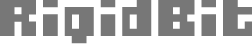
<style>
.page{position:relative;width:252px;height:44px;background:#777777}
.page>*{position:absolute;margin:0}
.t1{font:72px "Gubblebum-BlacknBlocky";color:#777777}
</style>
<div class="page">
<p class="t1" style="left:0px;top:0px;width:252px;height:44px">RigidBit</p>
</div>
